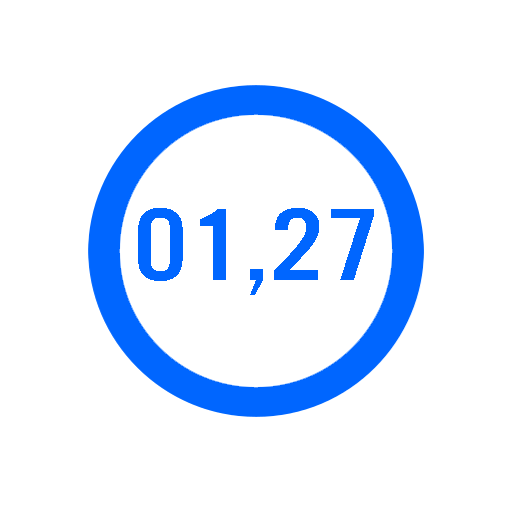
<style>
.page{position:relative;width:512px;height:512px;background:#ffffff}
.page>*{position:absolute;margin:0}
.t1{font:106.7px "UTM-Alter-Gothic";letter-spacing:0.01em;color:#0066ff;scale:1.25 1}
</style>
<div class="page">
<p class="t1" style="left:138px;top:208px;width:236px;height:87px">01,27</p>
</div>
